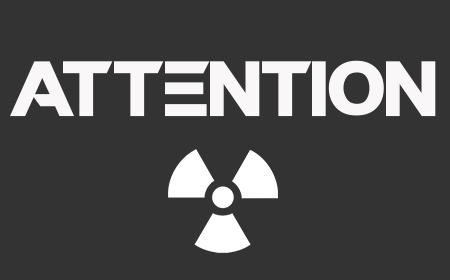
<style>
.page{position:relative;width:450px;height:280px;background:#333333}
.page>*{position:absolute;margin:0}
.t1{font:112px "ROBOTECHGP";color:#f9f7f7}
</style>
<div class="page">
<p class="t1" style="left:10px;top:60px;width:426px;height:57px">ATTENTION</p>
</div>
